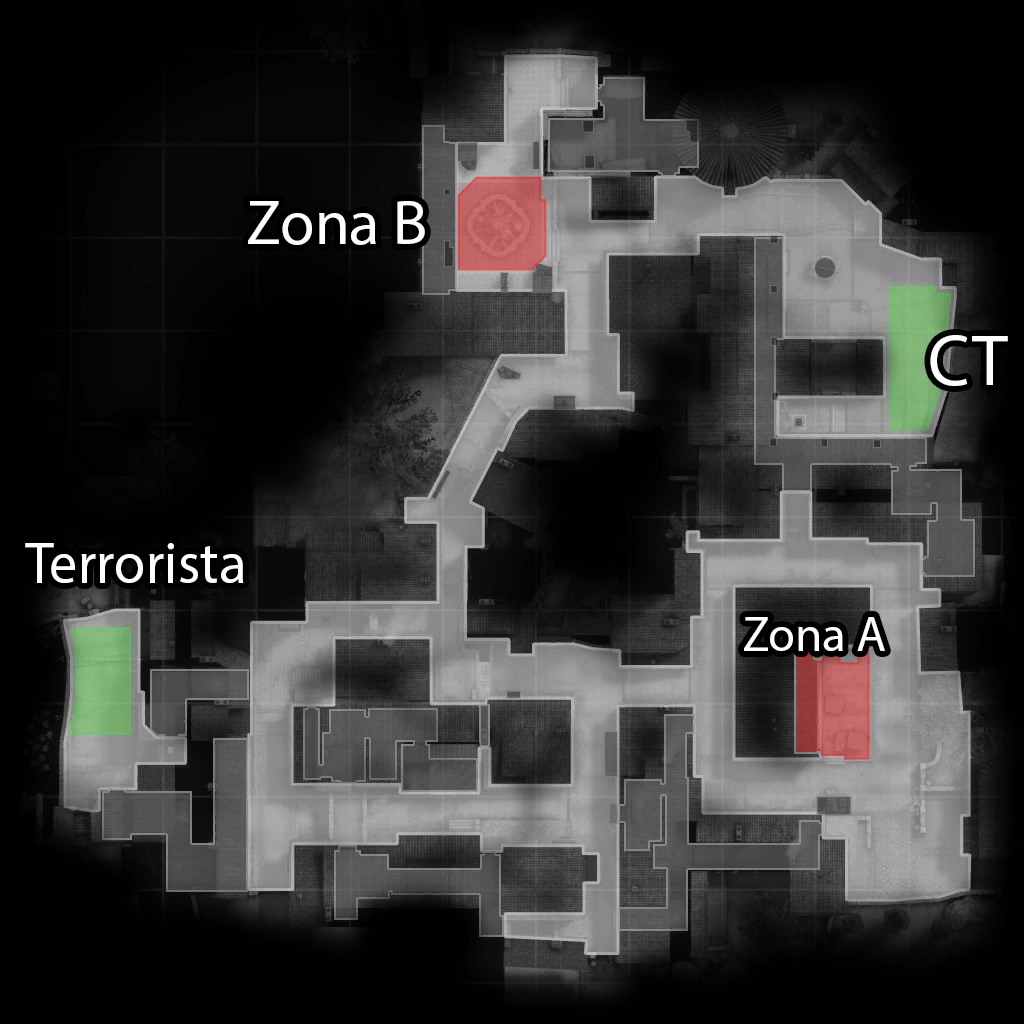
<style>
.page{position:relative;width:1024px;height:1024px}
.page>*{position:absolute;margin:0}
.t1{font:62.6px "MyriadPro-Regular";color:#ffffff}
.t2{font:72px "MyriadPro-Regular";color:#ffffff}
.t3{font:58.1px "MyriadPro-Regular";color:#ffffff}
.t4{font:49px "MyriadPro-Regular";color:#ffffff}
</style>
<div class="page">
<p class="t1" style="left:248px;top:201px;width:177px;height:44px">Zona B</p>
<p class="t2" style="left:930px;top:335px;width:78px;height:51px">CT</p>
<p class="t3" style="left:25px;top:543px;width:219px;height:40px">Terrorista</p>
<p class="t4" style="left:744px;top:617px;width:141px;height:34px">Zona A</p>
</div>
